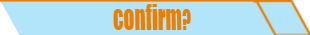
<style>
.page{position:relative;width:310px;height:35px;background:#b2e5f9}
.page>*{position:absolute;margin:0}
.t1{font:33.3px "Impact";color:#ec7f00;scale:0.64 1}
.t2{font:27px "Impact";color:#ec7f00;scale:0.64 1}
</style>
<div class="page">
<p class="t1" style="left:113px;top:4px;width:78px;height:26px"><span class="t2">                             </span>   confirm<span class="t2">?</span></p>
</div>
